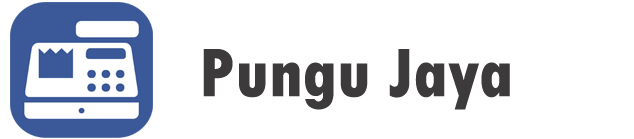
<style>
.page{position:relative;width:634px;height:139px;background:#ffffff}
.page>*{position:absolute;margin:0}
.t1{font:72px "TwCenMT-CondensedExtraBold";color:#3c3a3a}
</style>
<div class="page">
<p class="t1" style="left:203px;top:49px;width:307px;height:61px">Pungu Jaya</p>
</div>
